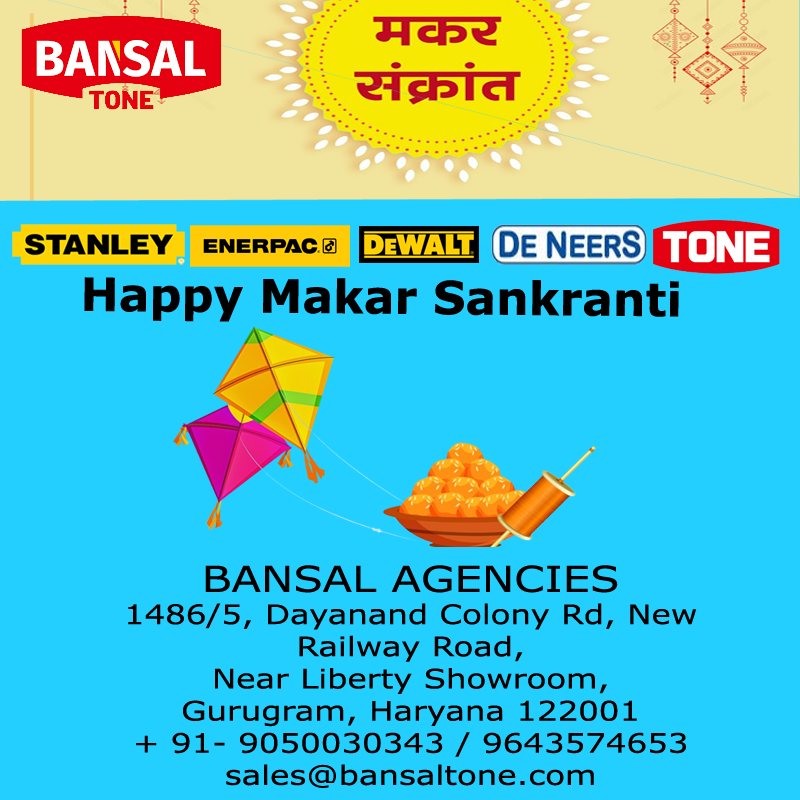
<style>
.page{position:relative;width:800px;height:800px;background:#23cfff}
.page>*{position:absolute;margin:0}
.t1{font:45.8px "Verdana-Bold";color:#000000}
.t2{font:26.8px "Verdana";color:#000000;scale:1.21 1}
.t3{font:35.7px "Verdana";color:#000000;scale:1.21 1}
</style>
<div class="page">
<p class="t1" style="left:84px;top:277px;width:595px;height:45px;rotate:1deg">Happy Makar Sankranti</p>
<p class="t2" style="left:128px;top:565px;width:569px;height:223px;text-align:center"><span class="t3">BANSAL AGENCIES<br></span>1486/5, Dayanand Colony Rd, New <br>Railway Road, <br>Near Liberty Showroom,<br>Gurugram, Haryana 122001<br>+ 91- 9050030343 / 9643574653<br>sales@bansaltone.com</p>
</div>
